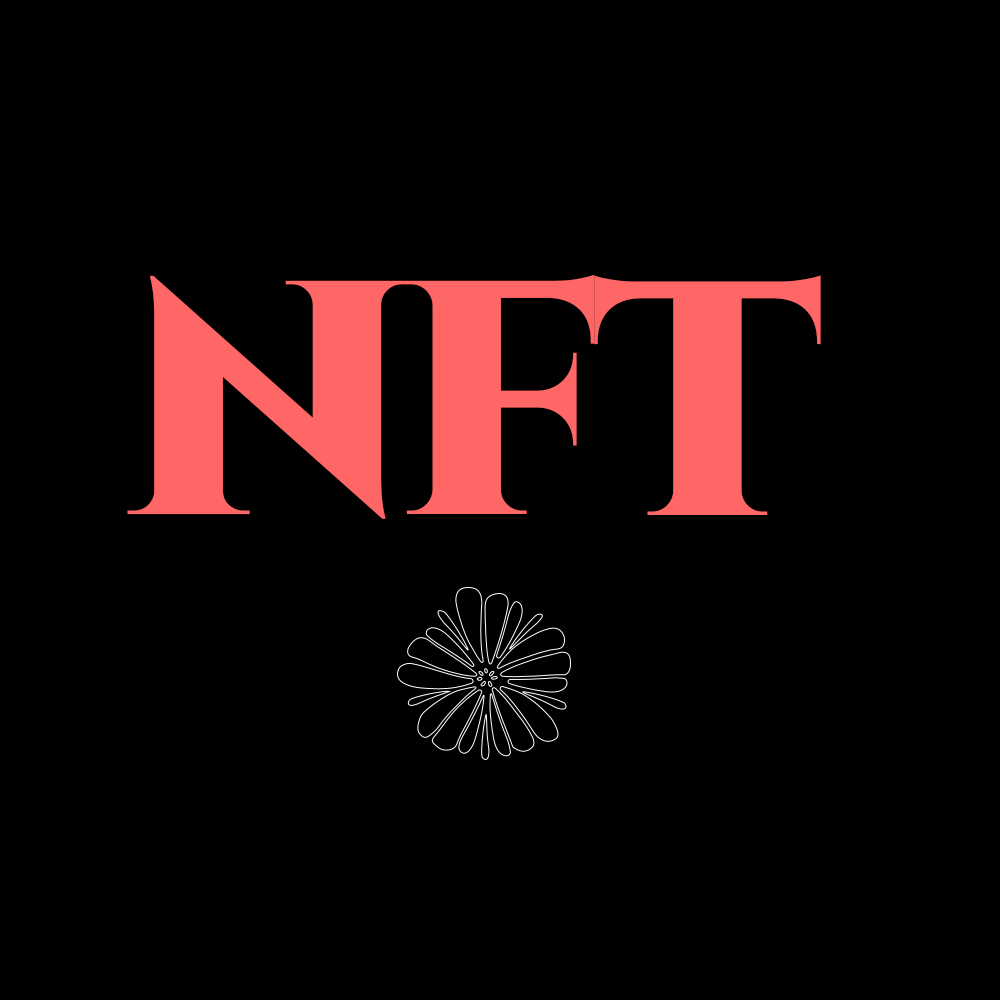
<style>
.page{position:relative;width:1000px;height:1000px;background:#000000}
.page>*{position:absolute;margin:0}
.t1{font:333.3px "Cinzel-Black";color:#ff6666}
</style>
<div class="page">
<p class="t1" style="left:127px;top:275px;width:281px;height:244px">N</p>
<p class="t1" style="left:406px;top:274px;width:189px;height:240px">F</p>
<p class="t1" style="left:594px;top:275px;width:227px;height:240px">T</p>
</div>
